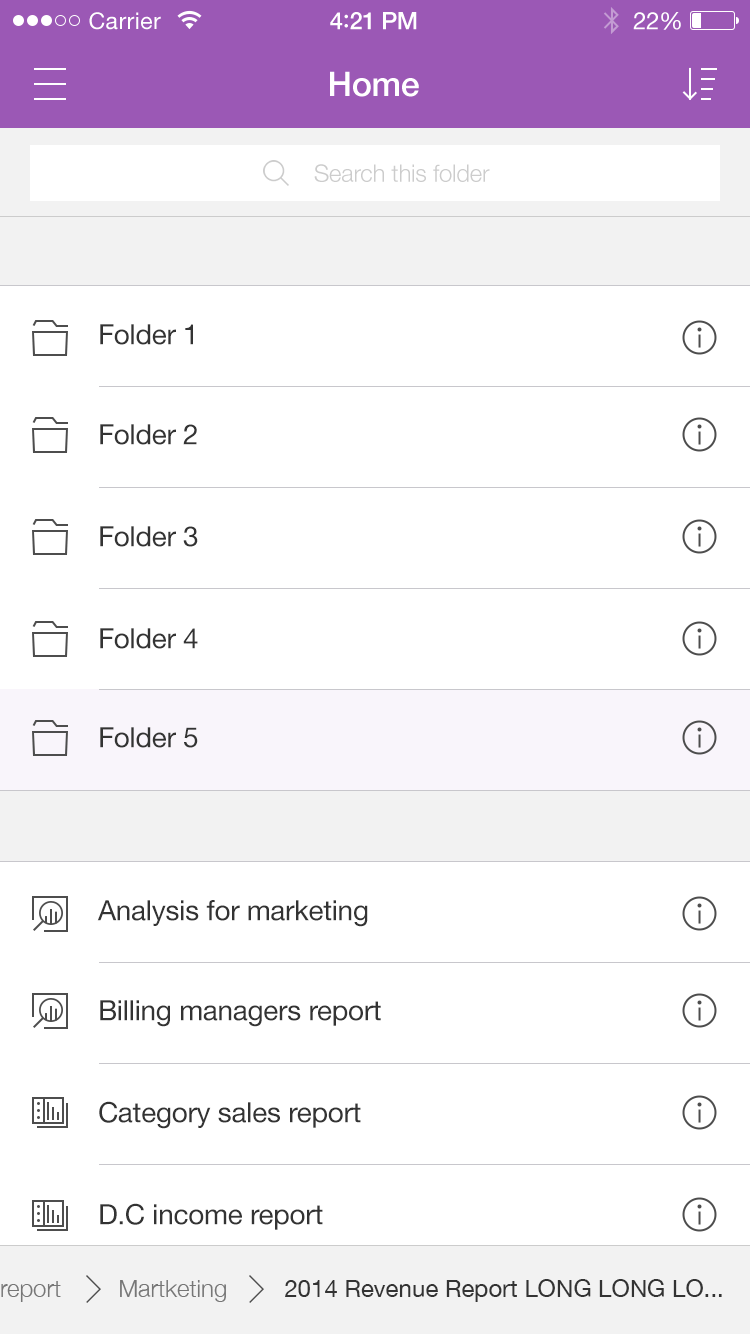
<style>
.page{position:relative;width:750px;height:1334px;background:#ffffff}
.page>*{position:absolute;margin:0}
.t1{font:23px "HelveticaNeue";letter-spacing:0.02em;color:#ffffff}
.t2{font:24px "HelveticaNeue-Medium";letter-spacing:-0.02em;color:#ffffff}
.t3{font:26px "Avenir-Medium";letter-spacing:-0.02em;color:#ffffff}
.t4{font:24px "HelveticaNeue";letter-spacing:-0.02em;color:#ffffff}
.t5{font:34px "HelveticaNeue-Medium";letter-spacing:-0.01em;color:#ffffff}
.t6{font:24px "HelveticaNeue-Light";letter-spacing:-0.01em;color:#cccccc}
.t7{font:28px "HelveticaNeue";letter-spacing:-0.01em;color:#333333}
.t8{font:24px "HelveticaNeue-Light";color:#767676}
.t9{font:24px "HelveticaNeue";color:#333333}
</style>
<div class="page">
<p class="t1" style="left:89px;top:12px;width:72px;height:18px">Carrier</p>
<p class="t2" style="left:330px;top:12px;width:87px;height:18px">4<span class="t3">:</span>21 PM</p>
<p class="t4" style="left:633px;top:12px;width:48px;height:18px">22%</p>
<p class="t5" style="left:330px;top:71px;width:89px;height:26px">Home</p>
<p class="t6" style="left:314px;top:164px;width:176px;height:18px">Search this folder</p>
<p class="t7" style="left:100px;top:324px;width:93px;height:21px">Folder 1</p>
<p class="t7" style="left:100px;top:424px;width:97px;height:21px">Folder 2</p>
<p class="t7" style="left:100px;top:526px;width:98px;height:21px">Folder 3</p>
<p class="t7" style="left:100px;top:628px;width:98px;height:21px">Folder 4</p>
<p class="t7" style="left:100px;top:727px;width:98px;height:21px">Folder 5</p>
<p class="t7" style="left:97px;top:900px;width:271px;height:27px">Analysis for marketing</p>
<p class="t7" style="left:100px;top:1000px;width:281px;height:27px">Billing managers report</p>
<p class="t7" style="left:99px;top:1101px;width:262px;height:28px">Category sales report</p>
<p class="t7" style="left:100px;top:1203px;width:223px;height:27px">D.C income report</p>
<p class="t8" style="left:120px;top:1280px;width:106px;height:22px">Martketing</p>
<p class="t9" style="left:285px;top:1279px;width:437px;height:23px">2014 Revenue Report LONG LONG LO...</p>
</div>
